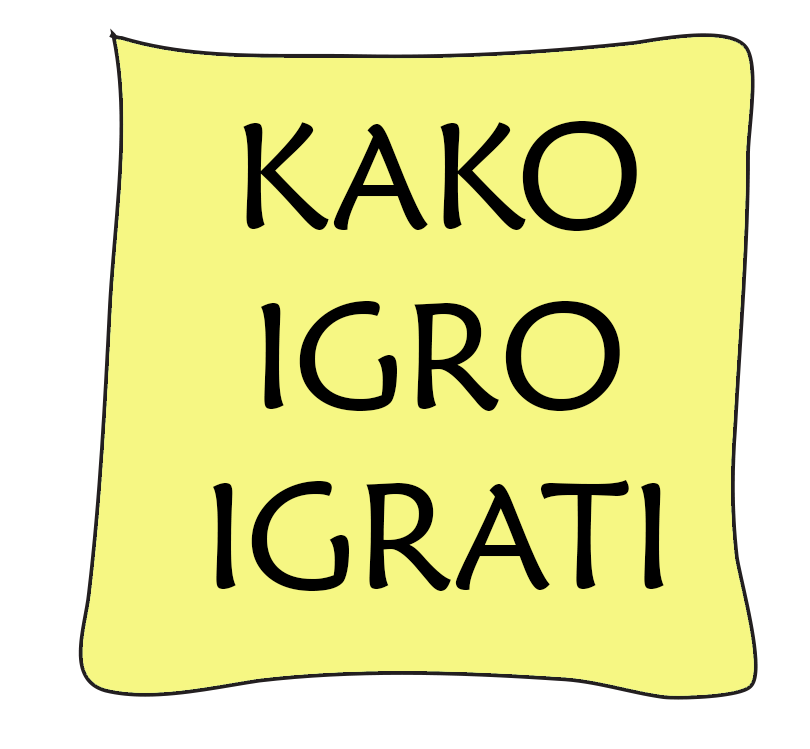
<style>
.page{position:relative;width:810px;height:749px;background:#f6f783}
.page>*{position:absolute;margin:0}
.t1{font:150px "MaiandraGD-Regular";color:#000000}
</style>
<div class="page">
<p class="t1" style="left:213px;top:121px;width:451px;height:470px;text-align:center">KAKO<br>IGRO<br>IGRATI</p>
</div>
